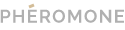
<style>
.page{position:relative;width:125px;height:30px;background:#ffffff}
.page>*{position:absolute;margin:0}
.t1{font:18px "Raleway-SemiBold";letter-spacing:0.075em;color:#b0b0b0;text-transform:uppercase}
</style>
<div class="page">
<p class="t1" style="left:0px;top:9px;width:124px;height:14px">pheromone</p>
</div>
